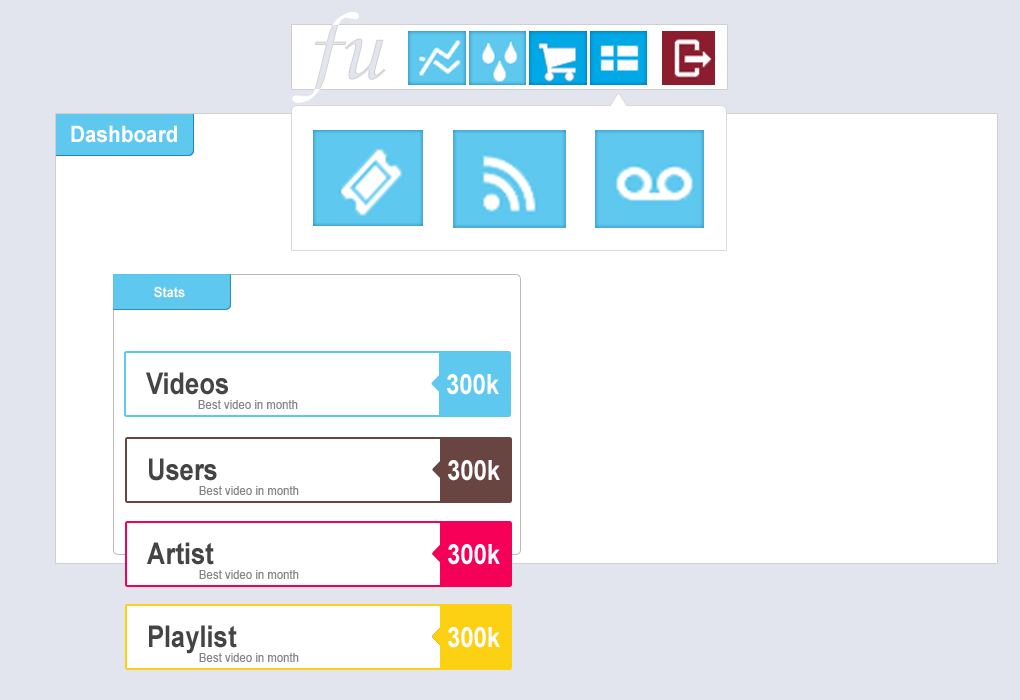
<style>
.page{position:relative;width:1020px;height:700px;background:#ffffff}
.page>*{position:absolute;margin:0}
.t1{font:22.8px "Arial-BoldMT";color:#fefefe;scale:0.91 1}
.t2{font:14px "Arial-BoldMT";color:#ffffff;scale:0.91 1}
.t3{font:30px "Arial-BoldMT";color:#444444;scale:0.85 1}
.t4{font:28px "Arial-BoldMT";color:#ffffff;scale:0.85 1}
.t5{font:12.1px "ArialMT";color:#858585;scale:0.94 1}
</style>
<div class="page">
<p class="t1" style="left:71px;top:125px;width:106px;height:18px">Dashboard</p>
<p class="t2" style="left:154px;top:286px;width:31px;height:12px">Stats</p>
<p class="t3" style="left:146px;top:372px;width:82px;height:23px">Videos</p>
<p class="t4" style="left:447px;top:374px;width:52px;height:21px">300k</p>
<p class="t5" style="left:198px;top:400px;width:100px;height:9px">Best video in month</p>
<p class="t3" style="left:149px;top:458px;width:68px;height:23px">Users</p>
<p class="t4" style="left:448px;top:460px;width:52px;height:21px">300k</p>
<p class="t5" style="left:199px;top:486px;width:100px;height:9px">Best video in month</p>
<p class="t3" style="left:147px;top:542px;width:67px;height:23px">Artist</p>
<p class="t4" style="left:448px;top:544px;width:52px;height:21px">300k</p>
<p class="t5" style="left:199px;top:570px;width:100px;height:9px">Best video in month</p>
<p class="t3" style="left:149px;top:625px;width:88px;height:29px">Playlist</p>
<p class="t4" style="left:448px;top:627px;width:52px;height:21px">300k</p>
<p class="t5" style="left:199px;top:653px;width:100px;height:9px">Best video in month</p>
</div>
